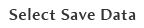
<style>
.page{position:relative;width:144px;height:28px;background:#ffffff}
.page>*{position:absolute;margin:0}
.t1{font:16px "AmiraParadiso";letter-spacing:0.05em;color:#333333}
</style>
<div class="page">
<p class="t1" style="left:9px;top:8px;width:127px;height:12px">Select Save Data</p>
</div>
